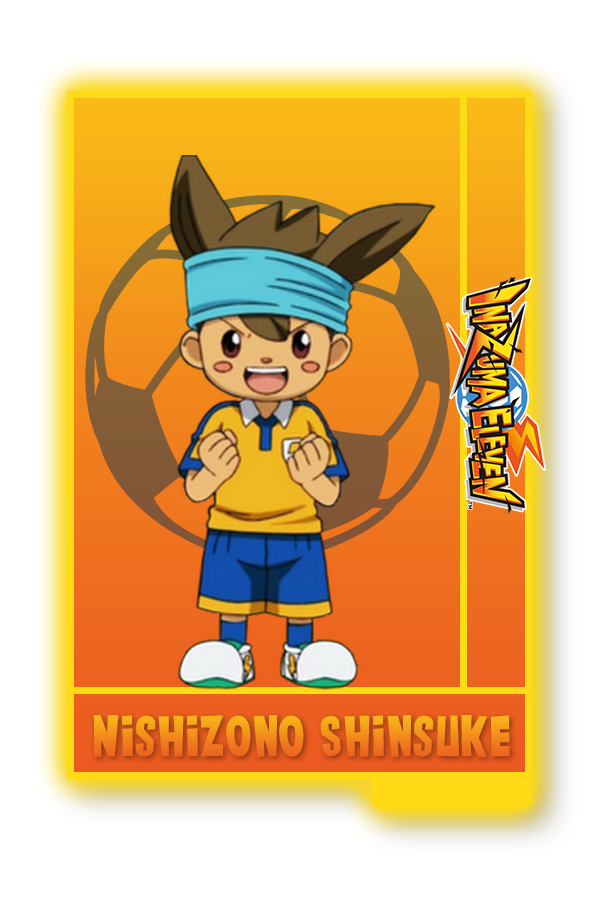
<style>
.page{position:relative;width:600px;height:900px;background:#ffffff}
.page>*{position:absolute;margin:0}
.t1{font:60.3px "TTG-Bold"}
</style>
<div class="page">
<p class="t1" style="left:93px;top:715px;width:417px;height:42px">Nishizono Shinsuke</p>
</div>
